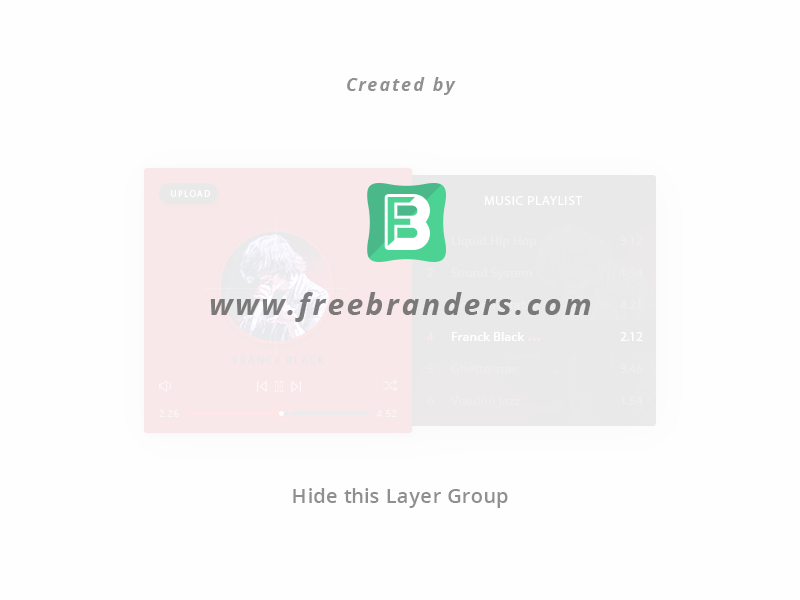
<style>
.page{position:relative;width:800px;height:600px;background:#fefefe}
.page>*{position:absolute;margin:0}
.t1{font:18px "OpenSans-BoldItalic";letter-spacing:0.1em;color:#909090}
.t2{font:9px "RobotoCondensed-Regular";letter-spacing:0.172em;color:#ffffff;text-transform:uppercase}
.t3{font:13px "RobotoCondensed-Regular";letter-spacing:0.06em;color:#ffffff;text-transform:uppercase}
.t4{font:13px/32px "RobotoCondensed-Light";color:#525252;text-transform:uppercase}
.t5{font:13px/32px "RobotoCondensed-Light";color:#ffffff;text-transform:uppercase}
.t6{font:11px "RobotoCondensed-Regular";letter-spacing:0.172em;color:#e9e9e9;text-transform:uppercase}
.t7{font:9px "OpenSans";letter-spacing:0.1em;color:#ffffff;text-transform:uppercase}
.t8{font:20px "OpenSans-Semibold";letter-spacing:0.012em;color:#8e8f90}
</style>
<div class="page">
<p class="t1" style="left:347px;top:77px;width:109px;height:18px">Created by</p>
<p class="t2" style="left:171px;top:190px;width:39px;height:7px">Upload</p>
<p class="t3" style="left:484px;top:196px;width:98px;height:9px">Music PlayList</p>
<p class="t4" style="left:620px;top:236px;width:23px;height:169px">3:12<br>1.54<br>4.21<br><span class="t5">2.12<br></span>3.46<br>1.54</p>
<p class="t6" style="left:233px;top:356px;width:92px;height:8px">Franck Black</p>
<p class="t7" style="left:159px;top:410px;width:20px;height:7px;opacity:0.44">2.26</p>
<p class="t7" style="left:377px;top:410px;width:20px;height:7px;opacity:0.44">4.52</p>
<p class="t8" style="left:293px;top:488px;width:215px;height:20px">Hide this Layer Group</p>
</div>
